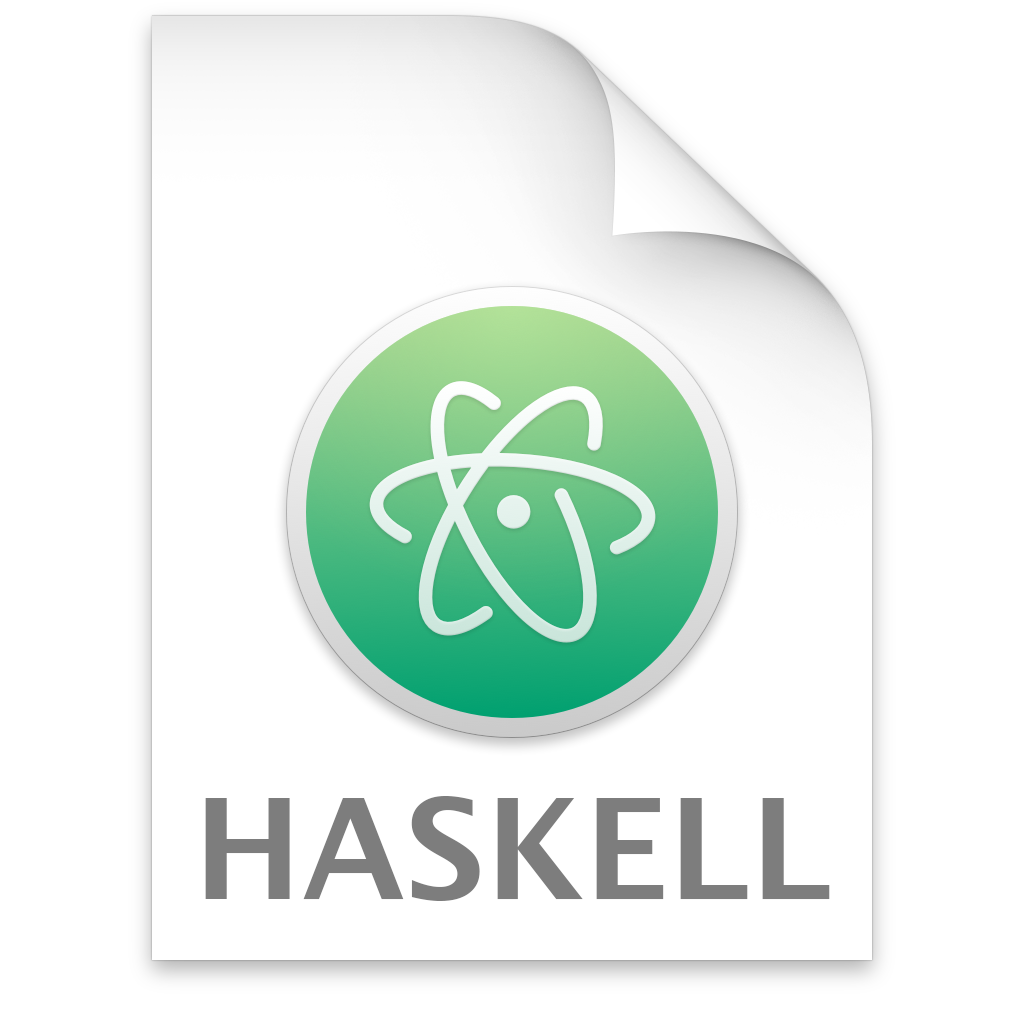
<style>
.page{position:relative;width:1024px;height:1024px;background:#ffffff}
.page>*{position:absolute;margin:0}
.t1{font:140px "LucidaGrande-Bold";color:#7d7d7d}
</style>
<div class="page">
<p class="t1" style="left:205px;top:796px;width:625px;height:105px">HASKELL</p>
</div>
